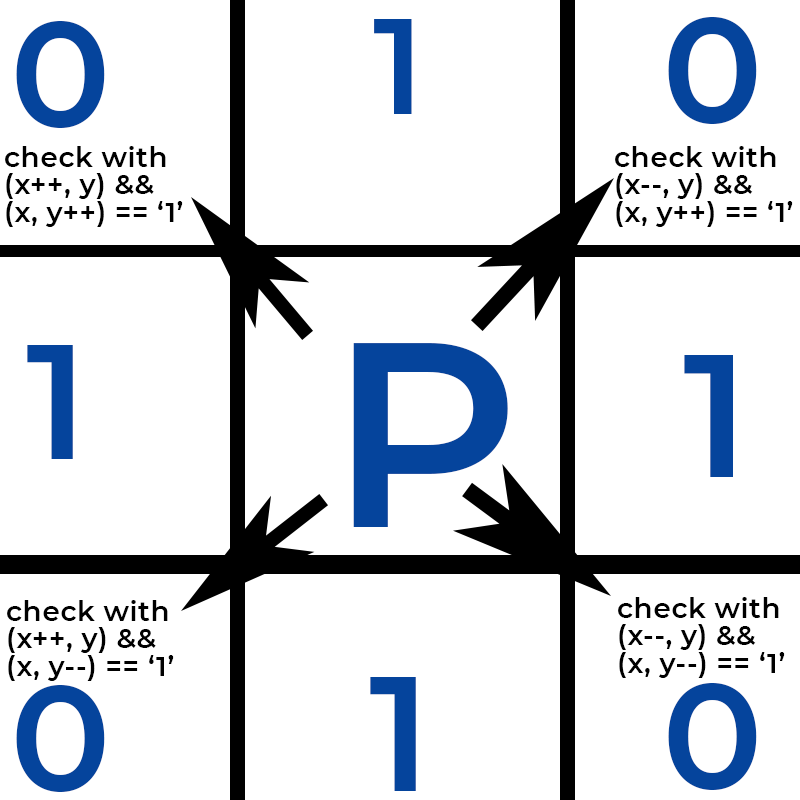
<style>
.page{position:relative;width:800px;height:800px;background:#ffffff}
.page>*{position:absolute;margin:0}
.t1{font:149.8px "Montserrat-SemiBold";letter-spacing:0.02em;color:#05449c}
.t2{font:134.7px "Montserrat-SemiBold";letter-spacing:0.02em;color:#05449c}
.t3{font:27.8px/27.8px "Montserrat-SemiBold";letter-spacing:0.02em;color:#000000}
.t4{font:163.6px "Montserrat-SemiBold";letter-spacing:0.02em;color:#05449c}
.t5{font:262.7px "Montserrat-SemiBold";letter-spacing:0.02em;color:#05449c}
.t6{font:174.7px "Montserrat-SemiBold";letter-spacing:0.02em;color:#05449c}
</style>
<div class="page">
<p class="t1" style="left:668px;top:17px;width:89px;height:107px">0</p>
<p class="t1" style="left:16px;top:21px;width:89px;height:107px">0</p>
<p class="t2" style="left:374px;top:19px;width:38px;height:95px">1</p>
<p class="t3" style="left:5px;top:146px;width:178px;height:81px">check with <br>(x++, y) &amp;&amp;<br>(x, y++) == ‘1’</p>
<p class="t3" style="left:615px;top:146px;width:178px;height:81px">check with <br>(x--, y) &amp;&amp;<br>(x, y++) == ‘1’</p>
<p class="t4" style="left:27px;top:345px;width:46px;height:114px">1</p>
<p class="t5" style="left:353px;top:343px;width:155px;height:184px">P</p>
<p class="t6" style="left:684px;top:355px;width:49px;height:122px">1</p>
<p class="t3" style="left:7px;top:600px;width:167px;height:81px">check with <br>(x++, y) &amp;&amp;<br>(x, y--) == ‘1’</p>
<p class="t3" style="left:618px;top:597px;width:167px;height:81px">check with <br>(x--, y) &amp;&amp;<br>(x, y--) == ‘1’</p>
<p class="t4" style="left:370px;top:677px;width:46px;height:114px">1</p>
<p class="t1" style="left:16px;top:685px;width:89px;height:107px">0</p>
<p class="t1" style="left:668px;top:683px;width:89px;height:107px">0</p>
</div>
